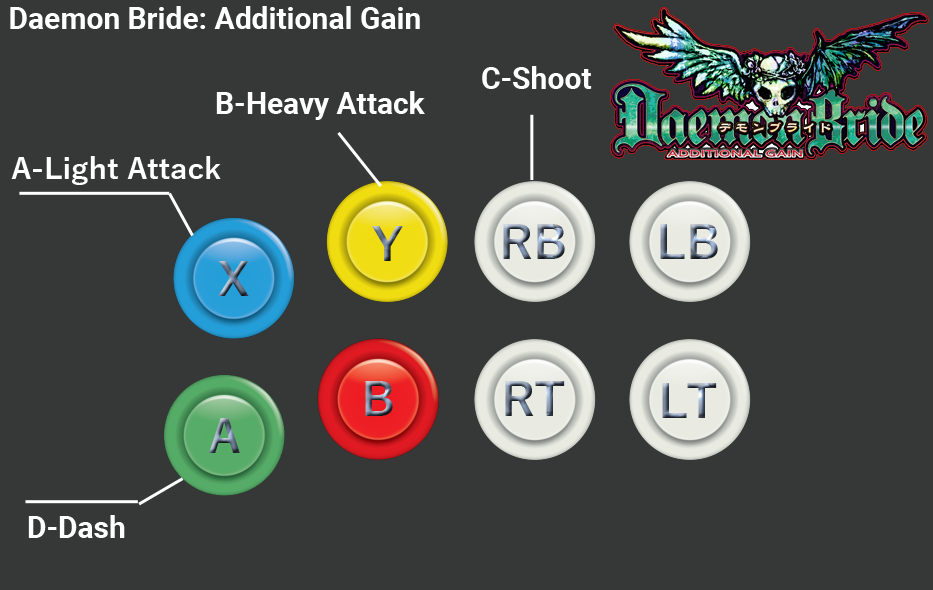
<style>
.page{position:relative;width:933px;height:590px;background:#363838}
.page>*{position:absolute;margin:0}
.t1{font:30px "Roboto-Bold";color:#ffffff}
.t2{font:30px "YuGothic-Bold";color:#ffffff}
</style>
<div class="page">
<p class="t1" style="left:10px;top:6px;width:410px;height:23px">Daemon Bride: Additional Gain</p>
<p class="t1" style="left:482px;top:66px;width:110px;height:23px">C-Shoot</p>
<p class="t1" style="left:216px;top:91px;width:209px;height:29px">B-Heavy Attack</p>
<p class="t2" style="left:11px;top:156px;width:210px;height:29px">A-Light Attack</p>
<p class="t1" style="left:28px;top:515px;width:97px;height:23px">D-Dash</p>
</div>
